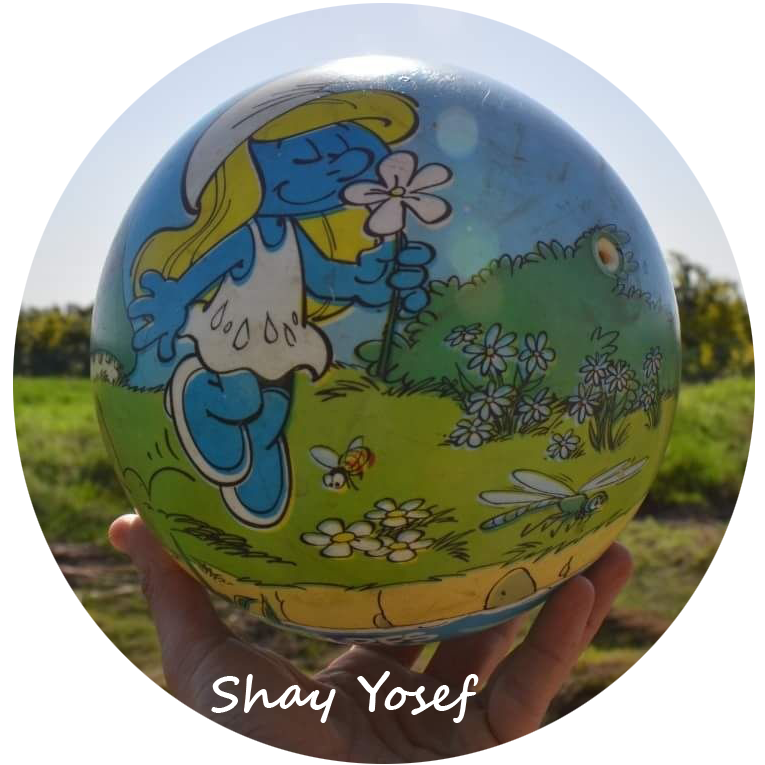
<style>
.page{position:relative;width:765px;height:765px;background:#ffffff}
.page>*{position:absolute;margin:0}
.t1{font:48px "SegoeScript-Bold";color:#ffffff}
</style>
<div class="page">
<p class="t1" style="left:211px;top:671px;width:268px;height:52px">Shay Yosef</p>
</div>
